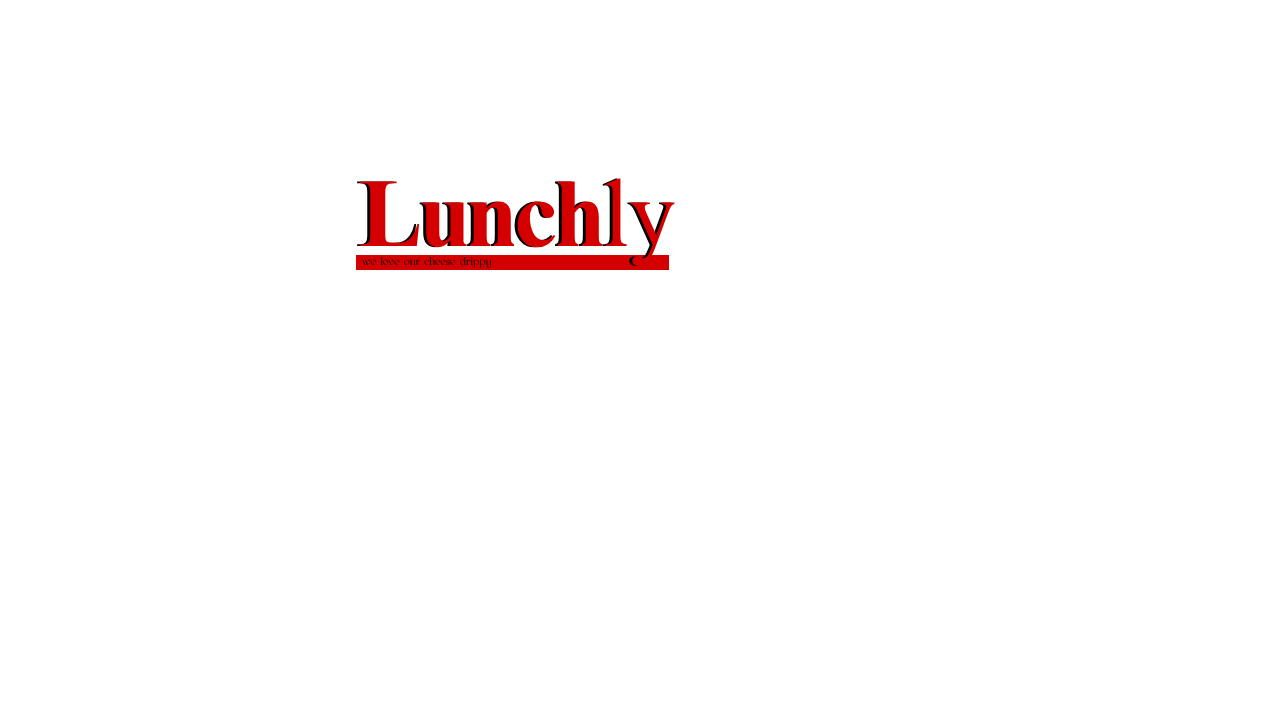
<style>
.page{position:relative;width:1280px;height:720px;background:#ffffff}
.page>*{position:absolute;margin:0}
.t1{font:94px "TimesNRCyrMT-Bold";color:#d40000}
.t2{font:94px "TimesNRCyrMT";color:#d40000}
.t3{font:11px "kawoszeh"}
</style>
<div class="page">
<p class="t1" style="left:357px;top:178px;width:315px;height:88px">Lunch<span class="t2">ly</span></p>
<p class="t1" style="left:360px;top:178px;width:315px;height:88px">Lunch<span class="t2">ly</span></p>
<p class="t3" style="left:361px;top:257px;width:130px;height:11px">we love our cheese drippy</p>
</div>
